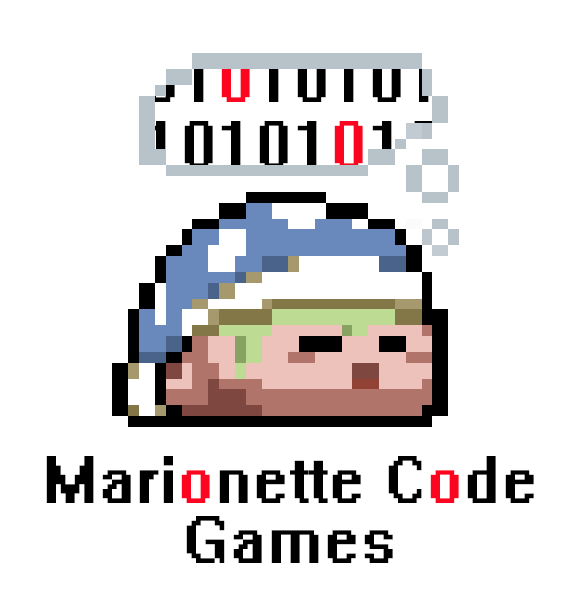
<style>
.page{position:relative;width:564px;height:604px;background:#ffffff}
.page>*{position:absolute;margin:0}
.t1{font:60px/36px "System";color:#000000}
.t2{font:60px/36px "System";color:#fb0520}
.t3{font:60px/60px "System";color:#000000}
.t4{font:60px/60px "System";color:#fb0520}
</style>
<div class="page">
<p class="t1" style="left:146px;top:55px;width:292px;height:113px;text-align:center">01<span class="t2">0</span>10101<br>10101<span class="t2">0</span>10</p>
<p class="t3" style="left:46px;top:456px;width:488px;height:107px;text-align:center">Mari<span class="t4">o</span>nette C<span class="t4">o</span>de Games</p>
</div>
